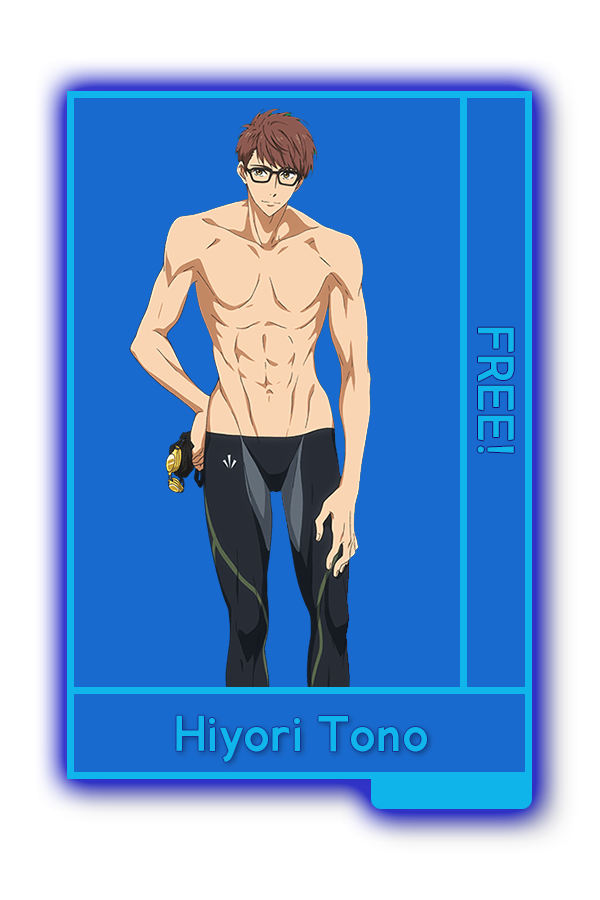
<style>
.page{position:relative;width:600px;height:900px;background:#196acf}
.page>*{position:absolute;margin:0}
.t1{font:47.8px "Ancillary-Bold";color:#0fb5eb}
.t2{font:46.7px "Ancillary-Bold";color:#0fb5eb}
</style>
<div class="page">
<p class="t1" style="left:477px;top:327px;width:37px;height:126px;rotate:90deg">FREE!</p>
<p class="t2" style="left:176px;top:715px;width:251px;height:47px">Hiyori Tono</p>
</div>
